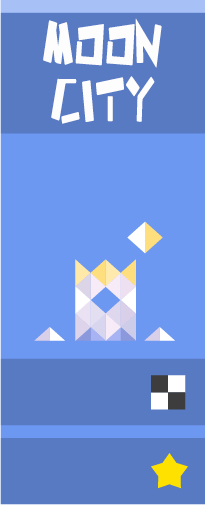
<style>
.page{position:relative;width:205px;height:505px;background:#577ac2}
.page>*{position:absolute;margin:0}
.t1{font:79.7px "HappyZcool";letter-spacing:-0.02em;color:#fdfdfd;text-transform:uppercase;scale:0.67 1}
</style>
<div class="page">
<p class="t1" style="left:43px;top:18px;width:119px;height:106px;text-align:center">MOON<br>CITY</p>
</div>
